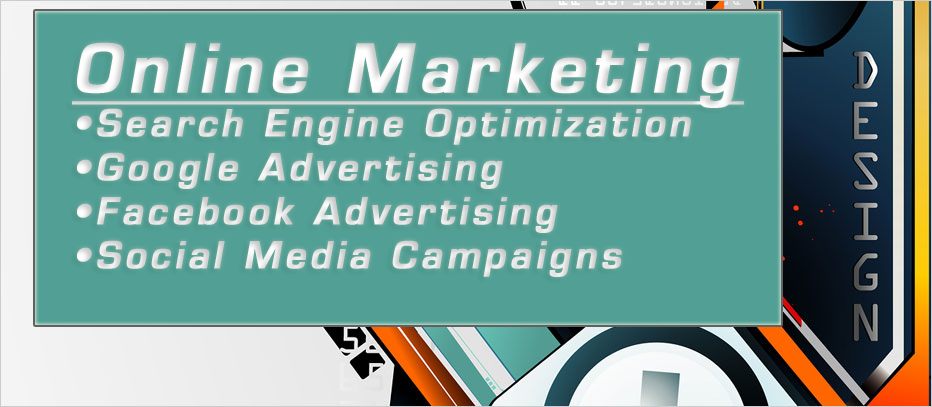
<style>
.page{position:relative;width:932px;height:407px;background:#529f95}
.page>*{position:absolute;margin:0}
.t1{font:36px/44px "Square721DmNormal";letter-spacing:0.095em;color:#e4e4e4;font-weight:bold;font-style:italic}
.t2{font:65px/44px "Square721DmNormal";letter-spacing:0.095em;color:#e4e4e4;font-weight:bold;font-style:italic;text-decoration:underline}
</style>
<div class="page">
<p class="t1" style="left:72px;top:42px;width:672px;height:235px"><span class="t2">Online Marketing<br></span>•Search Engine Optimization<br>•Google Advertising<br>•Facebook Advertising<br>•Social Media Campaigns</p>
</div>
